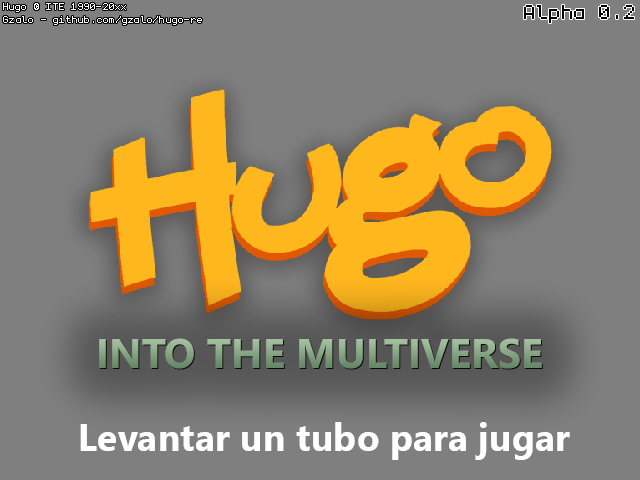
<style>
.page{position:relative;width:640px;height:480px;background:#7f7f7f}
.page>*{position:absolute;margin:0}
.t1{font:16.7px "monogram";color:#ffffff}
.t2{font:33.3px "monogram";color:#000000}
.t3{font:41.3px "SegoeUI-Bold"}
.t4{font:37.5px "SegoeUI-Bold";color:#ffffff}
</style>
<div class="page">
<p class="t1" style="left:3px;top:3px;width:123px;height:9px">Hugo © ITE 1990-20xx</p>
<p class="t2" style="left:524px;top:5px;width:110px;height:18px">Alpha 0.2</p>
<p class="t1" style="left:3px;top:16px;width:199px;height:9px">Gzalo - github.com/gzalo/hugo-re</p>
<p class="t3" style="left:99px;top:338px;width:443px;height:31px">INTO THE MULTIVERSE</p>
<p class="t4" style="left:80px;top:422px;width:490px;height:38px">Levantar un tubo para jugar</p>
</div>
